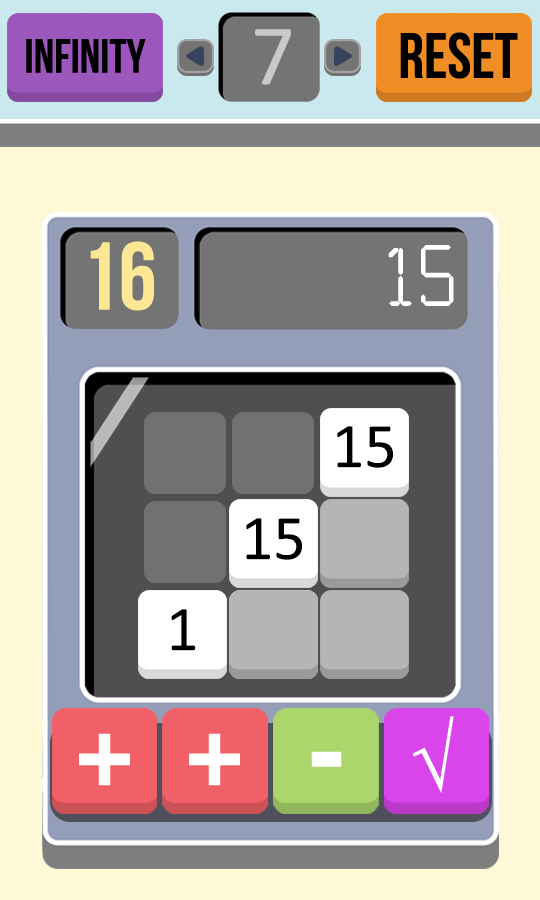
<style>
.page{position:relative;width:540px;height:900px;background:#fff8d6}
.page>*{position:absolute;margin:0}
.t1{font:86.7px "Calibri";color:#c9c9c9}
.t2{font:48px "BebasNeue";color:#000000}
.t3{font:64px "BebasNeue";color:#000000}
.t4{font:96px "BebasNeue";color:#fce795}
.t5{font:96px "Calculator";color:#ffffff}
.t6{font:64px "Calibri";color:#000000}
.t7{font:80px "TimesNewRomanPSMT";color:#ffffff}
.t8{font:146.6px "BebasNeue";color:#ffffff}
</style>
<div class="page">
<p class="t1" style="left:255px;top:29px;width:36px;height:56px">70</p>
<p class="t2" style="left:26px;top:39px;width:120px;height:34px">INFINITY</p>
<p class="t3" style="left:400px;top:32px;width:118px;height:47px">RESET</p>
<p class="t4" style="left:90px;top:241px;width:64px;height:70px">16</p>
<p class="t5" style="left:388px;top:245px;width:66px;height:61px">15</p>
<p class="t6" style="left:337px;top:426px;width:56px;height:42px">15</p>
<p class="t6" style="left:246px;top:518px;width:56px;height:42px">15</p>
<p class="t6" style="left:171px;top:609px;width:25px;height:42px">1</p>
<p class="t7" style="left:412px;top:716px;width:42px;height:77px">√</p>
<p class="t8" style="left:79px;top:733px;width:51px;height:53px">+</p>
<p class="t8" style="left:189px;top:733px;width:51px;height:53px">+</p>
<p class="t8" style="left:311px;top:751px;width:31px;height:16px">-</p>
</div>
